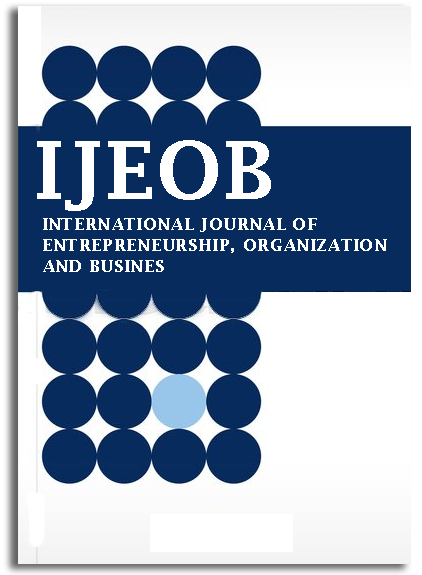
<style>
.page{position:relative;width:422px;height:575px;background:#072b5d}
.page>*{position:absolute;margin:0}
.t1{font:80px "LucidaFax-Demi";letter-spacing:0.02em;color:#ffffff}
.t2{font:17.3px "LucidaFax-Demi";letter-spacing:0.02em;color:#ffffff}
</style>
<div class="page">
<p class="t1" style="left:37px;top:140px;width:234px;height:71px">IJEOB</p>
<p class="t2" style="left:43px;top:218px;width:344px;height:54px">INTERNATIONAL JOURNAL OF<br>ENTREPRENEURSHIP, ORGANIZATION<br>AND BUSINES</p>
</div>
